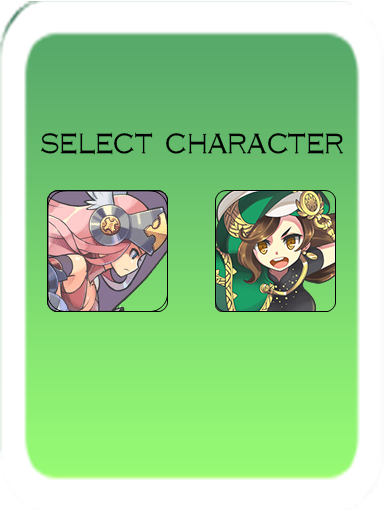
<style>
.page{position:relative;width:384px;height:512px;background:#ffffff}
.page>*{position:absolute;margin:0}
.t1{font:36px "Yj-GOTGAE-Medium";color:#000000}
</style>
<div class="page">
<p class="t1" style="left:41px;top:132px;width:303px;height:23px">select character</p>
</div>
